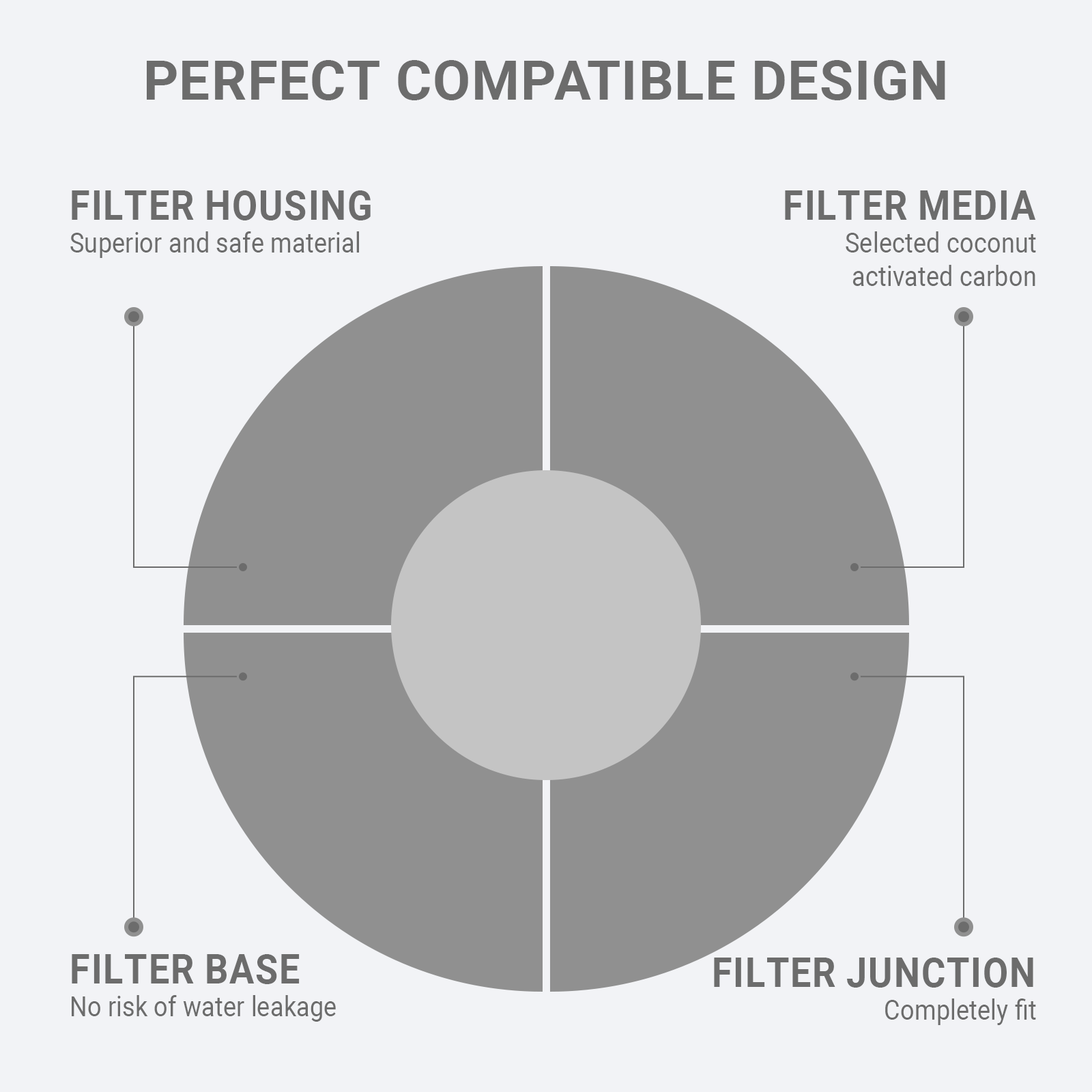
<style>
.page{position:relative;width:1092px;height:1092px;background:#f2f3f6}
.page>*{position:absolute;margin:0}
.t1{font:54.6px "Roboto-Bold";color:#6c6c6c;text-transform:uppercase}
.t2{font:40.9px "Roboto-Bold";color:#6c6c6c;text-transform:uppercase;scale:0.9 1}
.t3{font:27.7px "Roboto-Regular";color:#6c6c6c;scale:0.9 1}
</style>
<div class="page">
<p class="t1" style="left:147px;top:60px;width:798px;height:40px">Perfect compatible design</p>
<p class="t2" style="left:72px;top:190px;width:299px;height:30px">Filter housing</p>
<p class="t2" style="left:785px;top:190px;width:251px;height:30px">Filter media</p>
<p class="t3" style="left:70px;top:231px;width:289px;height:27px">Superior and safe material</p>
<p class="t3" style="left:846px;top:231px;width:190px;height:55px;text-align:right">Selected coconut<br>activated carbon</p>
<p class="t2" style="left:72px;top:954px;width:228px;height:30px">Filter base</p>
<p class="t2" style="left:714px;top:958px;width:319px;height:30px">Filter junction</p>
<p class="t3" style="left:72px;top:995px;width:264px;height:27px">No risk of water leakage</p>
<p class="t3" style="left:885px;top:998px;width:151px;height:27px">Completely fit</p>
</div>
